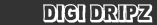
<style>
.page{position:relative;width:157px;height:25px;background:#333333}
.page>*{position:absolute;margin:0}
.t1{font:18px "OMNIBLACKOutline";color:#ffffff}
</style>
<div class="page">
<p class="t1" style="left:43px;top:4px;width:110px;height:19px">DIGI DRIPZ</p>
</div>
